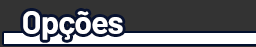
<style>
.page{position:relative;width:256px;height:47px;background:#333333}
.page>*{position:absolute;margin:0}
.t1{font:32px "Barlow-Bold";letter-spacing:-0.025em;color:#ffffff}
</style>
<div class="page">
<p class="t1" style="left:23px;top:11px;width:100px;height:29px">Opções</p>
</div>
